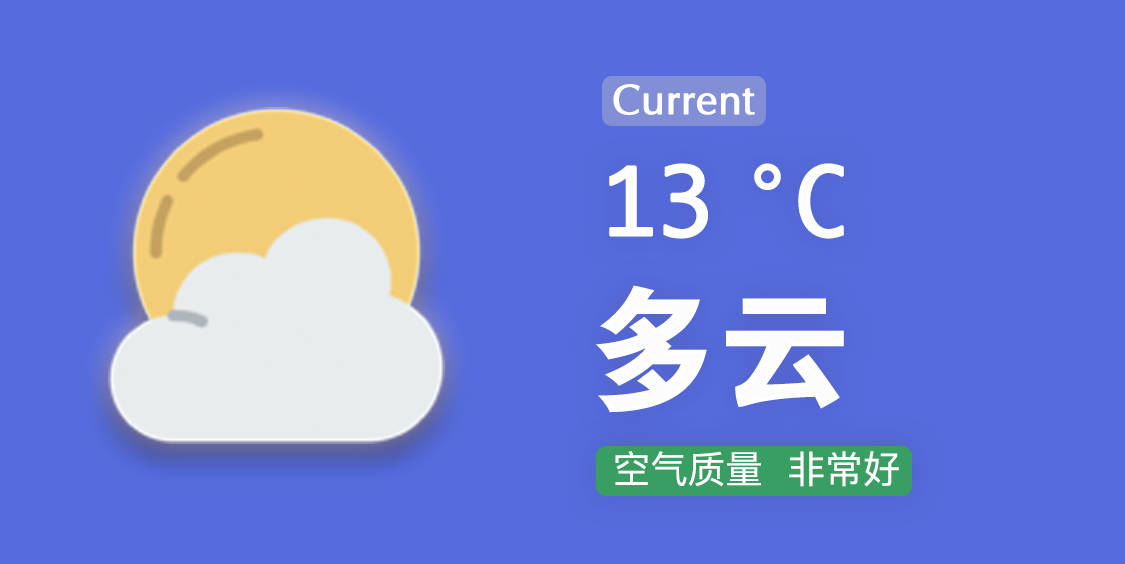
<style>
.page{position:relative;width:1125px;height:564px;background:#566cde}
.page>*{position:absolute;margin:0}
.t1{font:42px "FZWBJW--GB1-0";color:#ffffff;font-weight:bold}
.t2{font:90px "Ayuthaya";letter-spacing:-0.003em;color:#fcfcfc;font-weight:bold}
.t3{font:135px "FZDHTJW--GB1-0";letter-spacing:-0.003em;color:#fcfcfc}
.t4{font:37.5px "PingFangSC-Regular";color:#ffffff}
</style>
<div class="page">
<p class="t1" style="left:613px;top:84px;width:142px;height:31px">Current</p>
<p class="t2" style="left:609px;top:163px;width:235px;height:76px">13 ℃</p>
<p class="t3" style="left:596px;top:285px;width:248px;height:128px">多云</p>
<p class="t4" style="left:615px;top:451px;width:284px;height:36px">空气质量  非常好</p>
</div>
